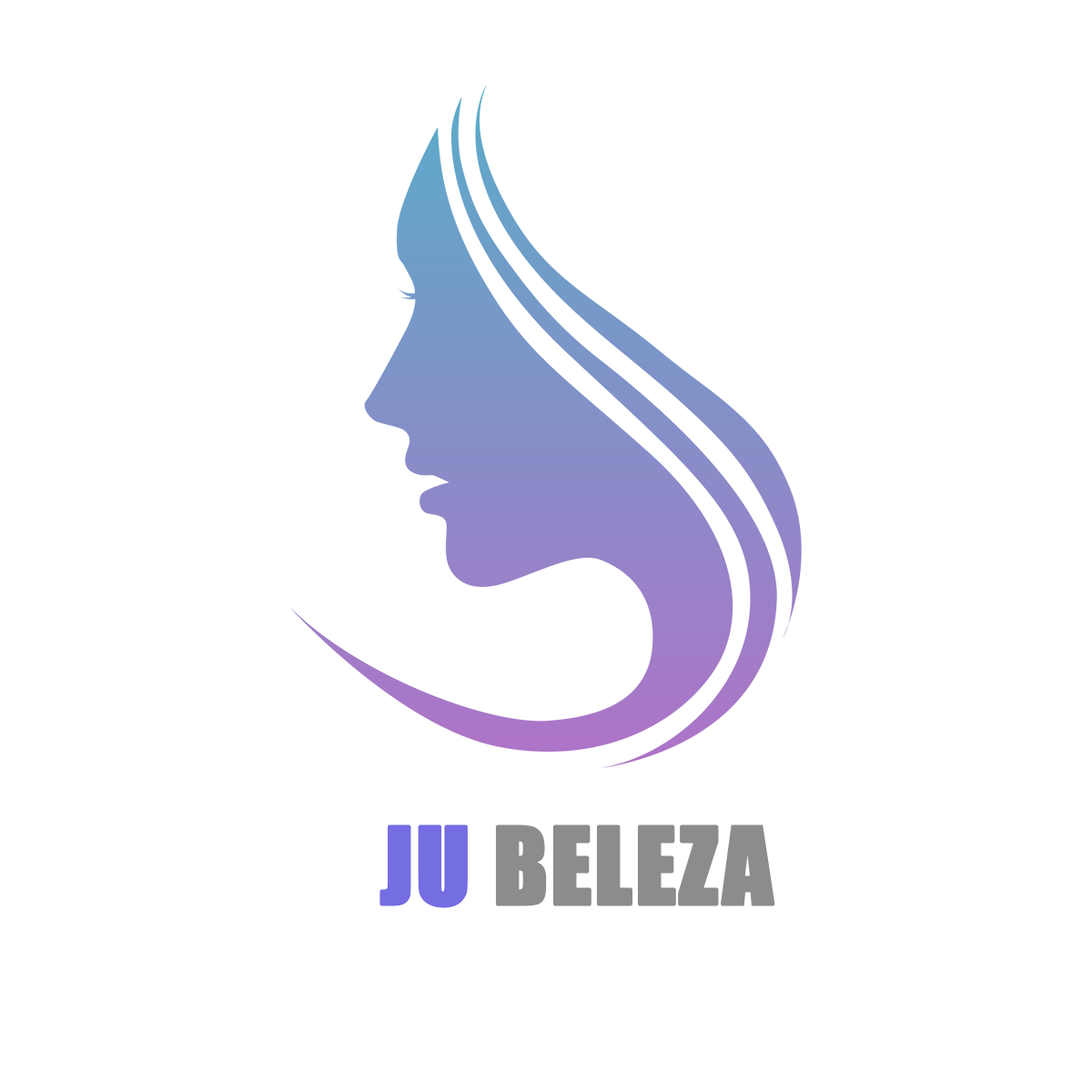
<style>
.page{position:relative;width:1092px;height:1092px;background:#ffffff}
.page>*{position:absolute;margin:0}
.t1{font:98.8px "Impact";color:#8c8c8c;text-transform:uppercase;font-weight:bold}
.t2{font:98.8px "Impact";color:#756de2;text-transform:uppercase;font-weight:bold}
</style>
<div class="page">
<p class="t1" style="left:379px;top:824px;width:396px;height:84px"><span class="t2">Ju </span>Beleza</p>
</div>
